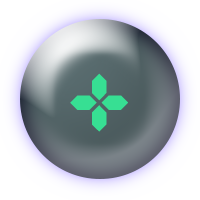
<style>
.page{position:relative;width:200px;height:200px}
.page>*{position:absolute;margin:0}
.t1{font:150px "DS-Digital-Bold";color:#36de92}
</style>
<div class="page">
<p class="t1" style="left:70px;top:73px;width:58px;height:59px">+</p>
</div>
